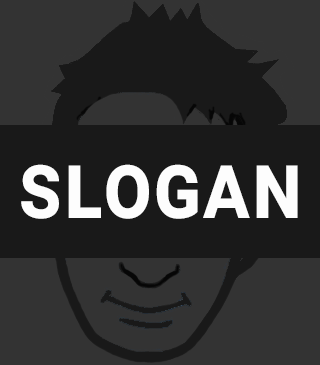
<style>
.page{position:relative;width:320px;height:365px;background:#191919}
.page>*{position:absolute;margin:0}
.t1{font:92.3px "Roboto-Bold";letter-spacing:0.035em;color:#fdfdfd;font-variant:small-caps;scale:0.87 1}
</style>
<div class="page">
<p class="t1" style="left:21px;top:164px;width:277px;height:55px">slogan</p>
</div>
